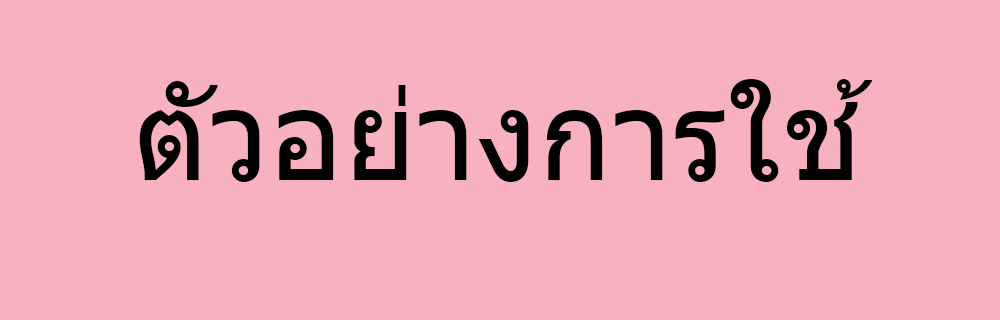
<style>
.page{position:relative;width:1000px;height:320px;background:#f8b1bf}
.page>*{position:absolute;margin:0}
.t1{font:125px "Tahoma";color:#000000}
</style>
<div class="page">
<p class="t1" style="left:139px;top:79px;width:734px;height:103px">ตัวอย่างการใช้</p>
</div>
